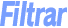
<style>
.page{position:relative;width:68px;height:28px;background:#ffffff}
.page>*{position:absolute;margin:0}
.t1{font:32px "RodinPro-EB";letter-spacing:-0.049em;color:#789ffe;font-style:italic;scale:0.73 1}
</style>
<div class="page">
<p class="t1" style="left:0px;top:1px;width:67px;height:26px">Filtrar</p>
</div>
